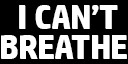
<style>
.page{position:relative;width:128px;height:64px;background:#000000}
.page>*{position:absolute;margin:0}
.t1{font:35px "HPSimplified-Bold";letter-spacing:-0.025em;color:#ffffff}
</style>
<div class="page">
<p class="t1" style="left:19px;top:5px;width:7px;height:24px">I</p>
<p class="t1" style="left:35px;top:5px;width:83px;height:24px">CAN’T</p>
<p class="t1" style="left:1px;top:35px;width:126px;height:24px">BREATHE</p>
</div>
